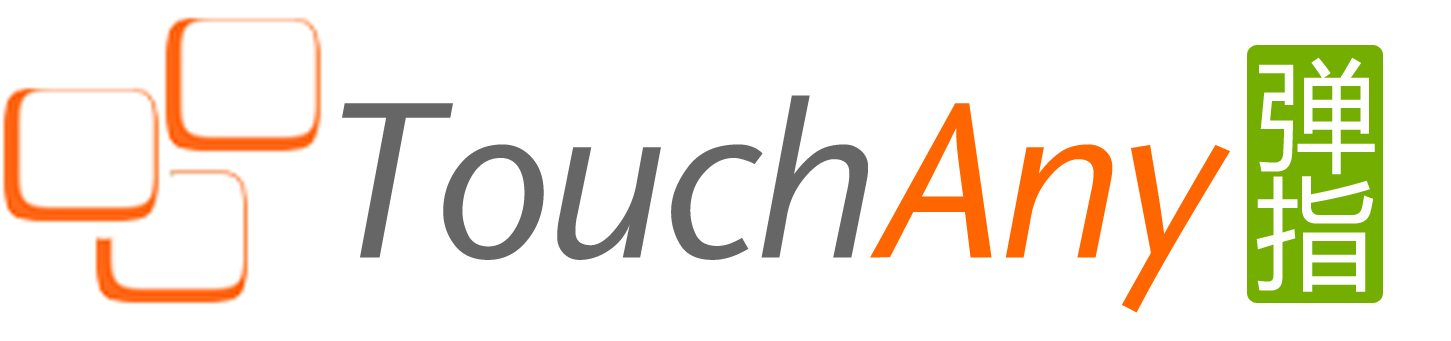
<style>
.page{position:relative;width:1451px;height:341px;background:#ffffff}
.page>*{position:absolute;margin:0}
.t1{font:120px "MicrosoftYaHei";letter-spacing:-0.01em;color:#fefefe}
.t2{font:220px "Sapir-Italic";letter-spacing:-0.01em;color:#666666}
.t3{font:220px "Sapir-Italic";letter-spacing:-0.01em;color:#ff6600}
.t4{font:120px "MicrosoftYaHei";letter-spacing:-0.01em;color:#fffefe}
</style>
<div class="page">
<p class="t1" style="left:1259px;top:57px;width:116px;height:118px">弹</p>
<p class="t2" style="left:342px;top:95px;width:888px;height:218px">Touch<span class="t3">Any</span></p>
<p class="t4" style="left:1256px;top:176px;width:118px;height:116px">指</p>
</div>
